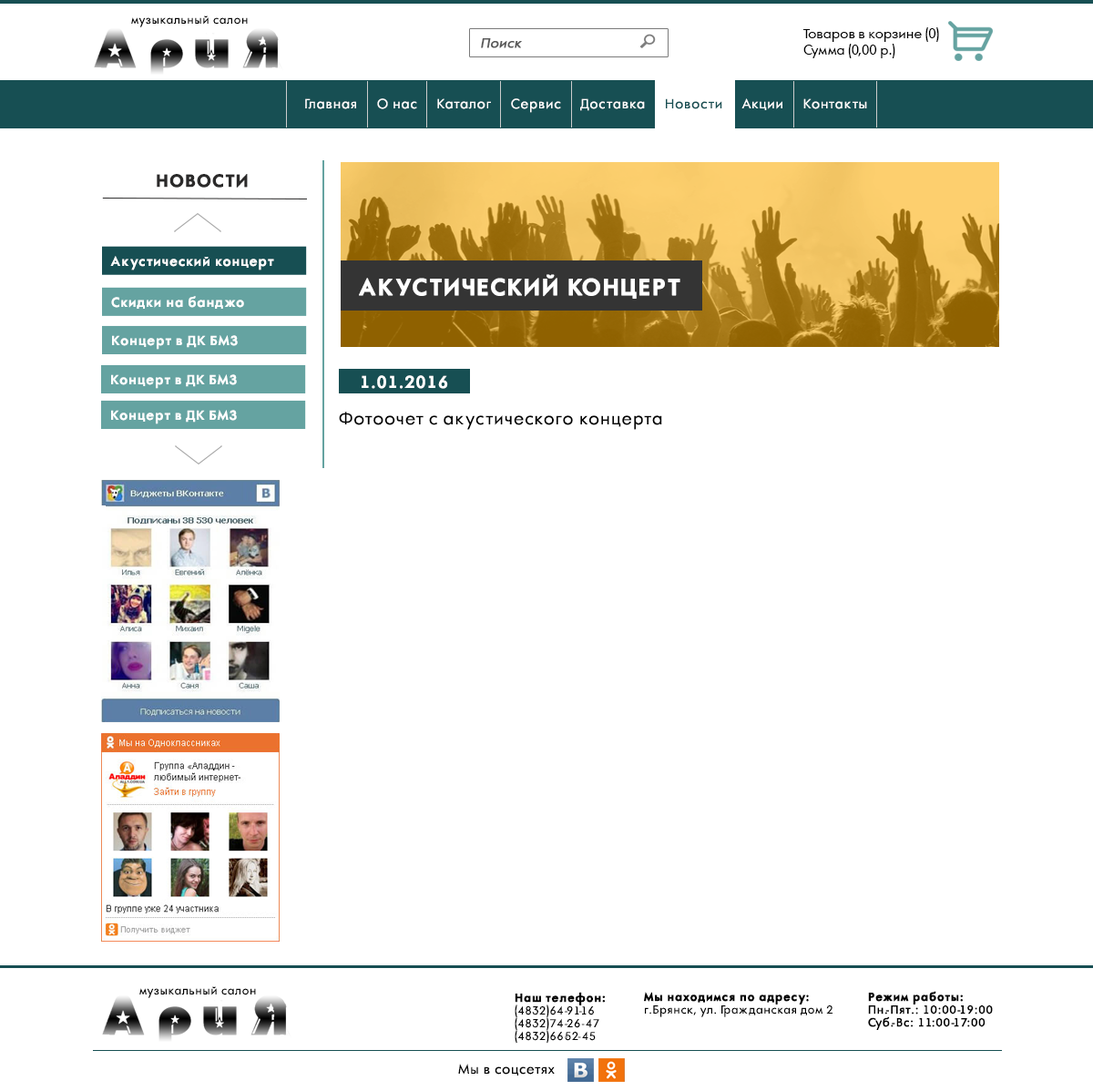
<style>
.page{position:relative;width:1093px;height:1091px;background:#ffffff}
.page>*{position:absolute;margin:0}
.t1{font:10.9px "AFuturaOrto";letter-spacing:0.05em;color:#000000}
.t2{font:12.8px/16.4px "AFuturaOrto";color:#000000}
.t3{font:12.8px "AFuturaOrto";color:#595959;font-weight:bold;font-style:italic}
.t4{font:12.8px "AFuturaOrto";letter-spacing:0.05em;color:#ffffff}
.t5{font:12.8px "AFuturaOrto";letter-spacing:0.05em;color:#174f53}
.t6{font:16.4px "AFuturaOrtoBold";letter-spacing:0.05em;color:#2b2a2a;text-transform:uppercase;font-weight:bold}
.t7{font:12.8px "AFuturaOrtoBold";letter-spacing:0.05em;color:#ffffff}
.t8{font:21.9px "AFuturaOrtoBold";letter-spacing:0.05em;color:#ffffff;font-weight:bold}
.t9{font:16.4px "AFuturaOrtoBold";letter-spacing:0.05em;color:#ffffff}
.t10{font:16.4px "AFuturaOrto";letter-spacing:0.05em;color:#000000}
.t11{font:10.9px/12.8px "AFuturaOrto";letter-spacing:0.05em;color:#000000}
.t12{font:10.9px/12.8px "AFuturaOrtoBold";letter-spacing:0.05em;color:#000000;font-weight:bold}
.t13{font:10.9px/12.8px "AFuturaOrto";letter-spacing:0.05em;color:#000000;font-weight:bold}
.t14{font:12.8px "AFuturaOrto";letter-spacing:0.05em;color:#000000}
</style>
<div class="page">
<p class="t1" style="left:131px;top:15px;width:117px;height:12px">музыкальный салон</p>
<p class="t2" style="left:803px;top:27px;width:136px;height:31px">Товаров в корзине (0)<br>Сумма (0,00 р.)</p>
<p class="t3" style="left:481px;top:38px;width:41px;height:10px">Поиск</p>
<p class="t4" style="left:305px;top:98px;width:562px;height:15px">Главная     О нас     Каталог     Сервис     Доставка     <span class="t5">Новости   </span>  Акции     Контакты</p>
<p class="t6" style="left:157px;top:174px;width:91px;height:14px">НОВОСТИ</p>
<p class="t7" style="left:110px;top:256px;width:164px;height:14px">Акустический концерт</p>
<p class="t8" style="left:359px;top:274px;width:321px;height:25px">АКУСТИЧЕСКИЙ КОНЦЕРТ</p>
<p class="t7" style="left:111px;top:296px;width:133px;height:13px">Скидки на банджо</p>
<p class="t7" style="left:112px;top:335px;width:126px;height:15px">Концерт в ДК БМЗ</p>
<p class="t7" style="left:111px;top:374px;width:126px;height:15px">Концерт в ДК БМЗ</p>
<p class="t9" style="left:362px;top:375px;width:86px;height:14px">1.01.2016</p>
<p class="t7" style="left:111px;top:410px;width:126px;height:14px">Концерт в ДК БМЗ</p>
<p class="t10" style="left:339px;top:412px;width:323px;height:18px">Фотоочет с акустического концерта</p>
<p class="t1" style="left:139px;top:986px;width:117px;height:12px">музыкальный салон</p>
<p class="t11" style="left:515px;top:992px;width:90px;height:52px"><span class="t12">Наш телефон:<br></span>(4832)64-91-16<br>(4832)74-26-47 <br>(4832)66-52-45</p>
<p class="t11" style="left:644px;top:992px;width:188px;height:25px"><span class="t12">Мы находимся по адресу:<br></span>г.Брянск, ул. Гражданская дом 2</p>
<p class="t13" style="left:868px;top:991px;width:125px;height:39px"><span class="t12">Режим работы:<br></span>Пн.-Пят.: 10:00-19:00<br>Суб.-Вс: 11:00-17:00</p>
<p class="t14" style="left:458px;top:1064px;width:97px;height:12px">Мы в соцсетях</p>
</div>
